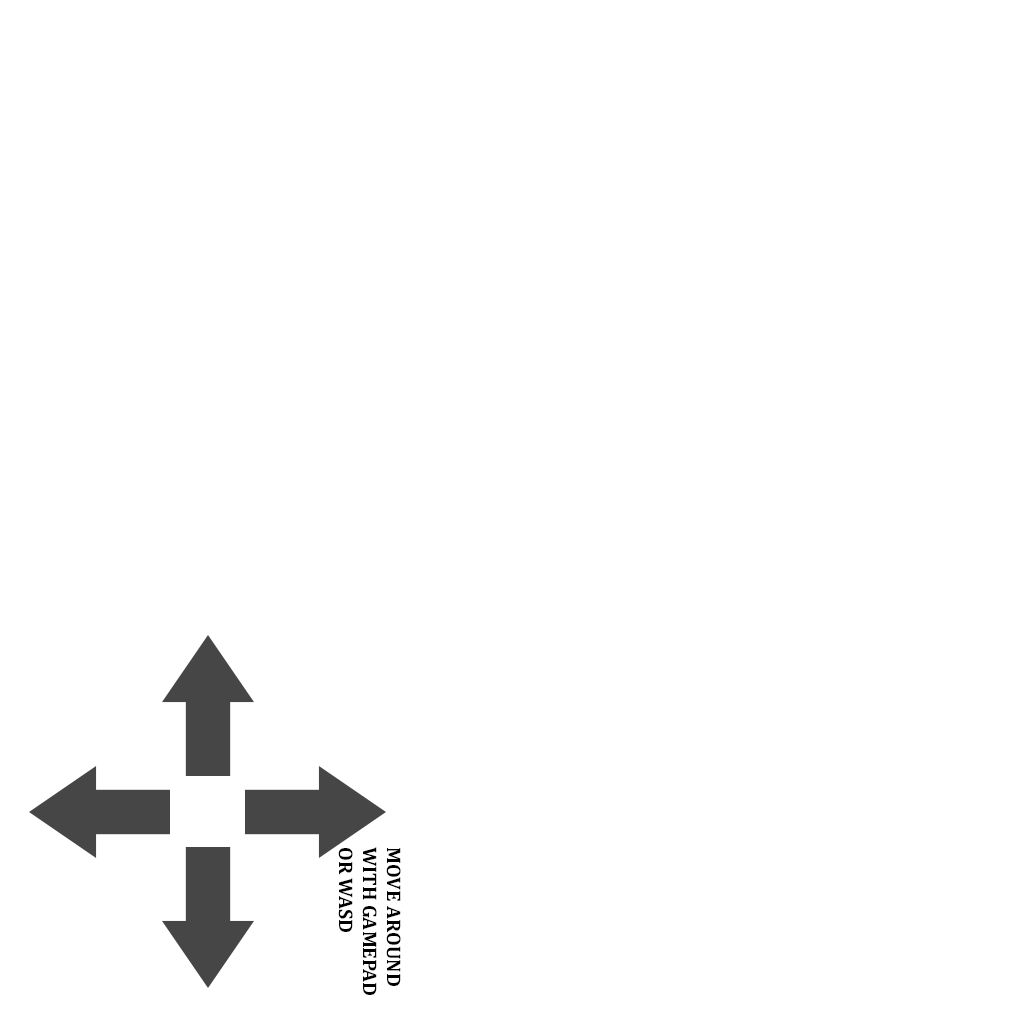
<style>
.page{position:relative;width:1024px;height:1024px;background:#ffffff}
.page>*{position:absolute;margin:0}
.t1{font:20px "Cambria-Bold";color:#000000}
</style>
<div class="page">
<p class="t1" style="left:338px;top:847px;width:63px;height:148px;text-align:right;rotate:90deg">MOVE AROUND<br>WITH GAMEPAD <br>OR WASD</p>
</div>
